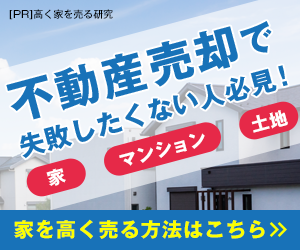
<style>
.page{position:relative;width:300px;height:250px;background:#1872b8}
.page>*{position:absolute;margin:0}
.t1{font:10px "GothicMB101Pro-Medium";color:#000000}
.t2{font:45px "GothicMB101Pro-Bold";letter-spacing:0.06em;color:#1872b8}
.t3{font:34px "GothicMB101Pro-Bold";letter-spacing:0.06em;color:#1872b8}
.t4{font:26px "GothicMB101Pro-Bold";letter-spacing:0.02em;color:#1872b8}
.t5{font:18px "GothicMB101Pro-Bold";letter-spacing:0.06em;color:#ffffff}
.t6{font:20px "GothicMB101Pro-Bold";letter-spacing:0.06em;color:#fcff00}
</style>
<div class="page">
<p class="t1" style="left:9px;top:9px;width:104px;height:11px">[PR]高く家を売る研究</p>
<p class="t2" style="left:6px;top:21px;width:266px;height:99px;rotate:-15deg">不動産売却<span class="t3">で</span></p>
<p class="t4" style="left:20px;top:65px;width:268px;height:94px;rotate:-15deg">失敗したくない人必見！</p>
<p class="t5" style="left:251px;top:110px;width:37px;height:23px;rotate:-15deg">土地</p>
<p class="t5" style="left:119px;top:133px;width:86px;height:33px;rotate:-15deg">マンション</p>
<p class="t5" style="left:46px;top:168px;width:20px;height:18px;rotate:-15deg">家</p>
<p class="t6" style="left:14px;top:219px;width:251px;height:20px">家を高く売る方法はこちら</p>
</div>
